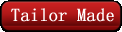
<style>
.page{position:relative;width:122px;height:32px}
.page>*{position:absolute;margin:0}
.t1{font:18px "SimSun";color:#ffffff;font-weight:bold}
</style>
<div class="page">
<p class="t1" style="left:11px;top:8px;width:103px;height:14px">Tailor Made</p>
</div>
